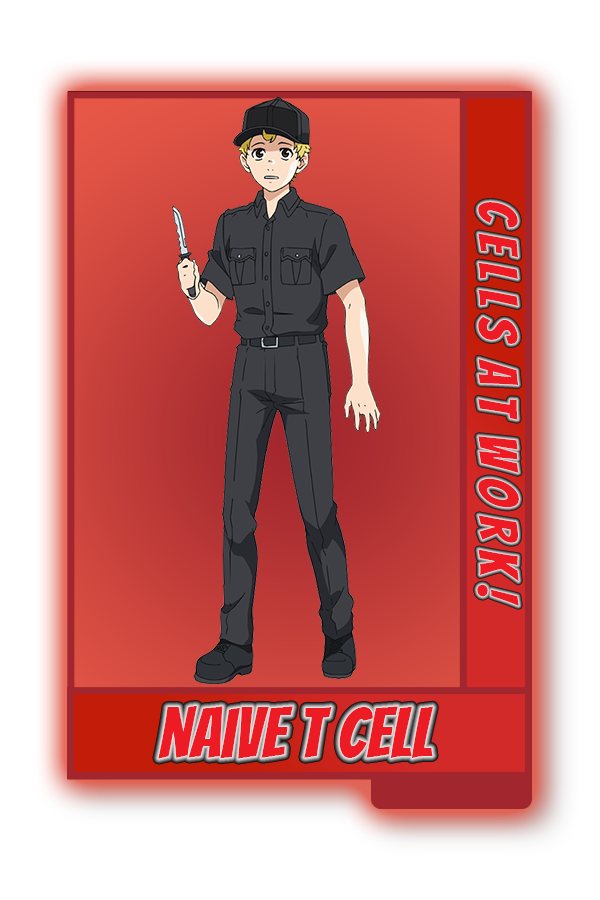
<style>
.page{position:relative;width:600px;height:900px;background:#ffffff}
.page>*{position:absolute;margin:0}
.t1{font:54px "Bangers-Regular";color:#ed1c24}
.t2{font:70px "Bangers-Regular";color:#ed1c24}
</style>
<div class="page">
<p class="t1" style="left:477px;top:202px;width:42px;height:404px;rotate:90deg">C e l l S  A t  W o r k !</p>
<p class="t2" style="left:158px;top:706px;width:275px;height:53px">naive t cell</p>
</div>
